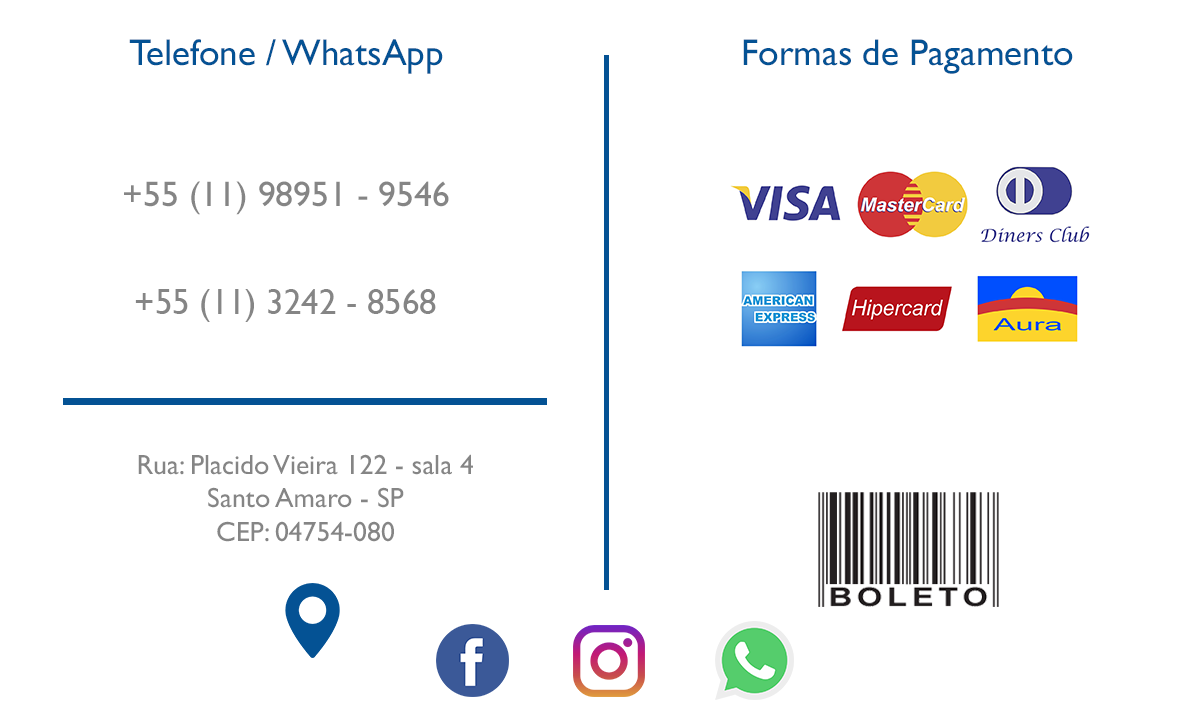
<style>
.page{position:relative;width:1200px;height:720px;background:#ffffff}
.page>*{position:absolute;margin:0}
.t1{font:37.5px "GillSansMT";color:#045294}
.t2{font:35.6px "GillSansMT";color:#858585}
.t3{font:27.8px "GillSansMT";color:#858585}
</style>
<div class="page">
<p class="t1" style="left:129px;top:39px;width:314px;height:35px">Telefone / WhatsApp</p>
<p class="t1" style="left:743px;top:39px;width:330px;height:35px">Formas de Pagamento</p>
<p class="t2" style="left:124px;top:181px;width:325px;height:34px">+55 (11) 98951 - 9546</p>
<p class="t2" style="left:135px;top:289px;width:301px;height:33px">+55 (11) 3242 - 8568</p>
<p class="t3" style="left:138px;top:454px;width:335px;height:88px;text-align:center">Rua: Placido Vieira 122 - sala 4<br>Santo Amaro - SP<br>CEP: 04754-080</p>
</div>
